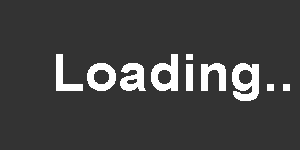
<style>
.page{position:relative;width:300px;height:150px;background:#333333}
.page>*{position:absolute;margin:0}
.t1{font:51.9px "Arial-BoldMT";color:#ffffff;scale:1.05 1}
</style>
<div class="page">
<p class="t1" style="left:56px;top:54px;width:234px;height:47px">Loading..</p>
</div>
